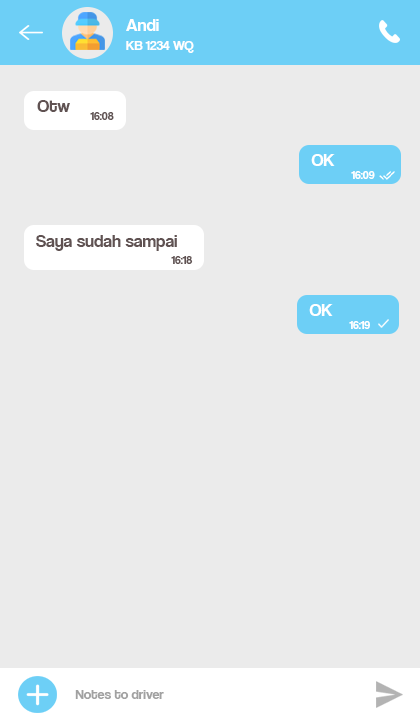
<style>
.page{position:relative;width:420px;height:720px;background:#ebebeb}
.page>*{position:absolute;margin:0}
.t1{font:18px "CoolveticaRg-Regular";color:#ffffff}
.t2{font:14px "CoolveticaRg-Regular";color:#ffffff}
.t3{font:18px "CoolveticaRg-Regular";color:#605252}
.t4{font:12px "CoolveticaRg-Regular";color:#605252}
.t5{font:12px "CoolveticaRg-Regular";color:#ffffff}
.t6{font:14px "CoolveticaRg-Regular";color:#a1a1a1}
</style>
<div class="page">
<p class="t1" style="left:126px;top:19px;width:33px;height:12px">Andi</p>
<p class="t2" style="left:126px;top:41px;width:68px;height:12px">KB 1234 WQ</p>
<p class="t3" style="left:37px;top:100px;width:33px;height:12px">Otw</p>
<p class="t4" style="left:90px;top:112px;width:24px;height:8px">16:08</p>
<p class="t1" style="left:311px;top:154px;width:24px;height:12px">OK</p>
<p class="t5" style="left:351px;top:171px;width:24px;height:8px">16:09</p>
<p class="t3" style="left:36px;top:235px;width:141px;height:16px">Saya sudah sampai</p>
<p class="t4" style="left:171px;top:256px;width:22px;height:8px">16:18</p>
<p class="t1" style="left:309px;top:304px;width:24px;height:12px">OK</p>
<p class="t5" style="left:349px;top:321px;width:21px;height:8px">16:19</p>
<p class="t6" style="left:75px;top:690px;width:89px;height:9px">Notes to driver</p>
</div>
